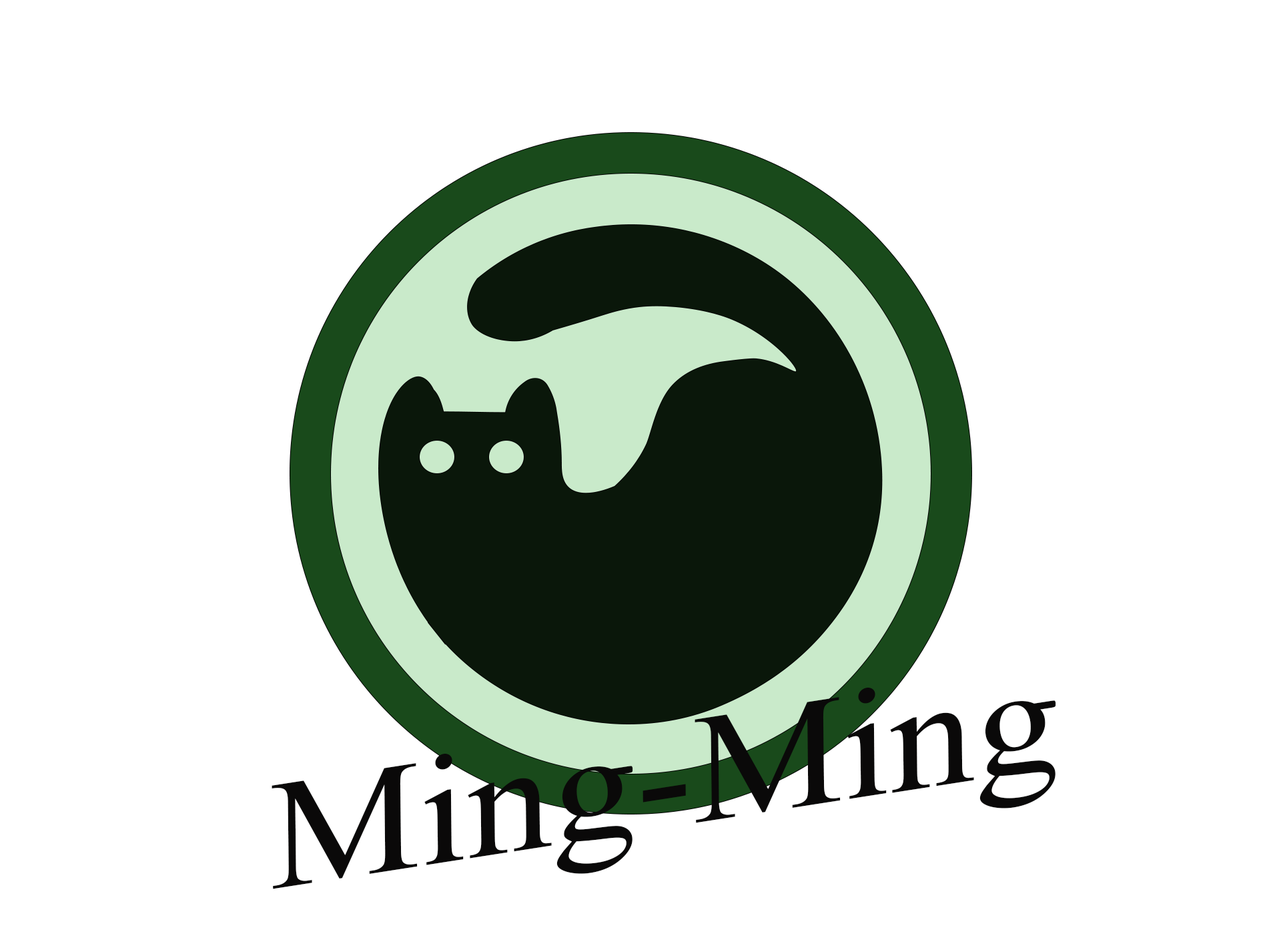
<style>
.page{position:relative;width:1261px;height:946px;background:#ffffff}
.page>*{position:absolute;margin:0}
.t1{font:155.8px "MongolianBaiti";color:#0a0909;scale:1.1 1}
.t2{font:155.8px "MongolianBaiti";color:#ffffff;scale:1.1 1}
</style>
<div class="page">
<p class="t1" style="left:272px;top:687px;width:784px;height:202px;rotate:-9deg">Ming-Ming<span class="t2">g</span></p>
</div>
